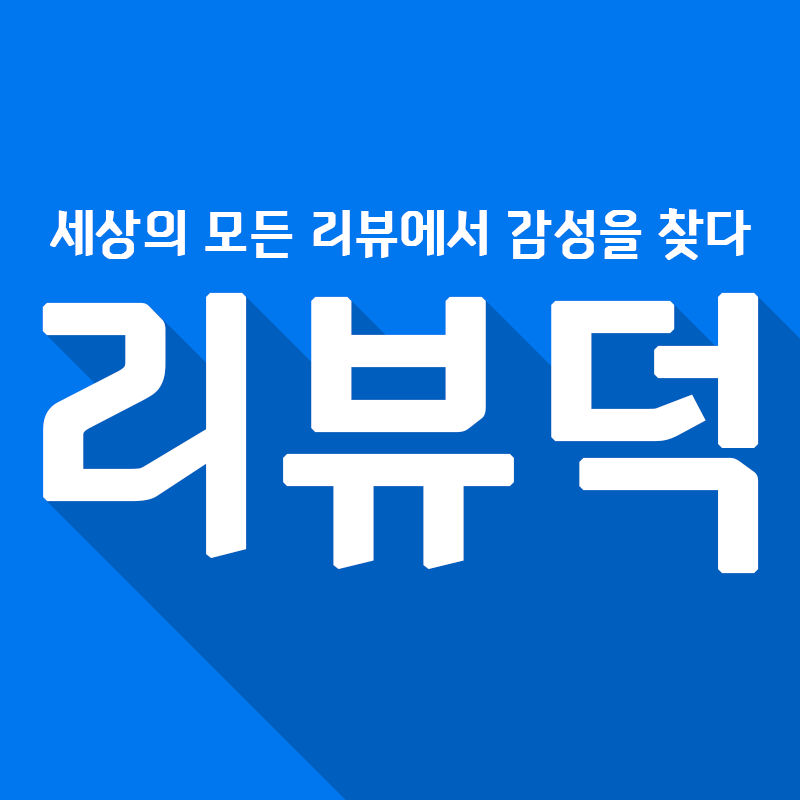
<style>
.page{position:relative;width:800px;height:800px;background:#0077ee}
.page>*{position:absolute;margin:0}
.t1{font:53px "NEXONFootballGothicL";color:#ffffff;font-weight:bold}
.t2{font:300px "NEXONFootballGothicL";color:#ffffff;font-weight:bold}
</style>
<div class="page">
<p class="t1" style="left:50px;top:208px;width:701px;height:52px">세상의 모든 리뷰에서 감성을 찾다</p>
<p class="t2" style="left:42px;top:292px;width:717px;height:282px">리뷰덕</p>
</div>
